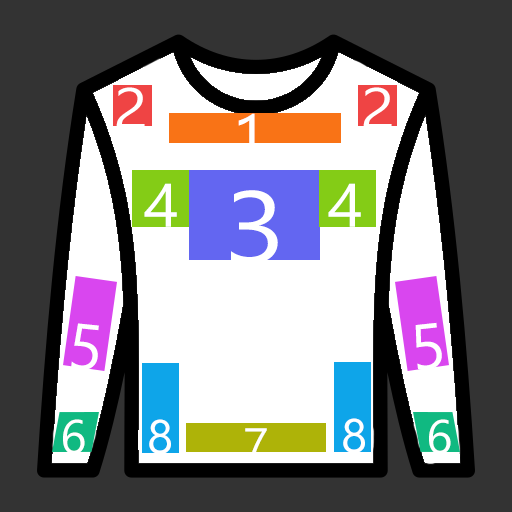
<style>
.page{position:relative;width:512px;height:512px;background:#333333}
.page>*{position:absolute;margin:0}
.t1{font:56.7px "SegoeUISymbol";color:#ffffff;scale:1.13 1}
.t2{font:61.5px "SegoeUISymbol";color:#ffffff;scale:1.05 1}
.t3{font:101.6px "SegoeUISymbol";color:#ffffff;scale:1.13 1}
.t4{font:64.2px "SegoeUISymbol";color:#ffffff}
.t5{font:48px "SegoeUISymbol";color:#ffffff}
.t6{font:44.7px "SegoeUISymbol";color:#ffffff;scale:1.07 1}
</style>
<div class="page">
<p class="t1" style="left:116px;top:87px;width:29px;height:41px">2</p>
<p class="t1" style="left:363px;top:87px;width:29px;height:41px">2</p>
<p class="t2" style="left:238px;top:113px;width:17px;height:45px">1</p>
<p class="t2" style="left:144px;top:183px;width:33px;height:44px">4</p>
<p class="t2" style="left:328px;top:183px;width:33px;height:44px">4</p>
<p class="t3" style="left:231px;top:190px;width:47px;height:74px">3</p>
<p class="t4" style="left:71px;top:323px;width:28px;height:47px;rotate:6deg">5</p>
<p class="t4" style="left:415px;top:322px;width:27px;height:48px;rotate:-6deg">5</p>
<p class="t5" style="left:63px;top:419px;width:22px;height:35px">6</p>
<p class="t5" style="left:149px;top:419px;width:22px;height:35px">8</p>
<p class="t5" style="left:343px;top:418px;width:22px;height:35px">8</p>
<p class="t5" style="left:429px;top:419px;width:22px;height:35px">6</p>
<p class="t6" style="left:245px;top:428px;width:22px;height:32px">7</p>
</div>
